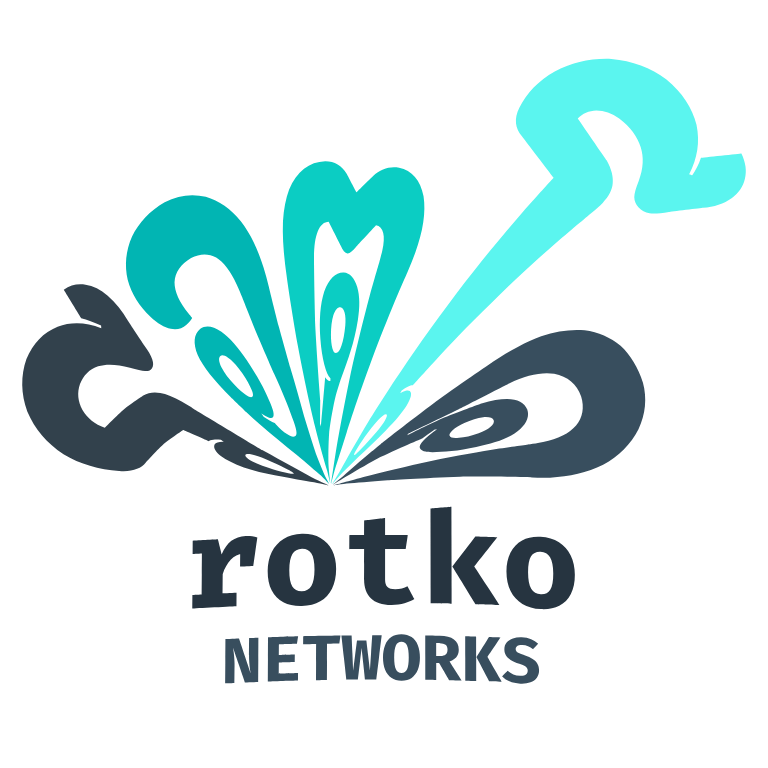
<style>
.page{position:relative;width:768px;height:768px;background:#ffffff}
.page>*{position:absolute;margin:0}
.t1{font:124px "K2D-ExtraBoldItalic";color:#32414c}
.t2{font:124px "K2D-ExtraBoldItalic";color:#01b5b3}
.t3{font:124px "K2D-ExtraBoldItalic";color:#0bcdc3}
.t4{font:124px "K2D-ExtraBoldItalic";color:#5bf5ef}
.t5{font:124px "K2D-ExtraBoldItalic";color:#384e5e}
.t6{font:64px "FiraCode-Bold";color:#384e5e}
.t7{font:128px "FiraCode-Bold";color:#263440}
</style>
<div class="page">
<p class="t1" style="left:20px;top:58px;width:727px;height:428px">ร<span class="t2">อ</span><span class="t3">ต</span><span class="t4">โ</span><span class="t5">ค</span></p>
<p class="t6" style="left:192px;top:506px;width:383px;height:178px;text-align:center"><span class="t7">rotko<br></span>NETWORKS</p>
</div>
